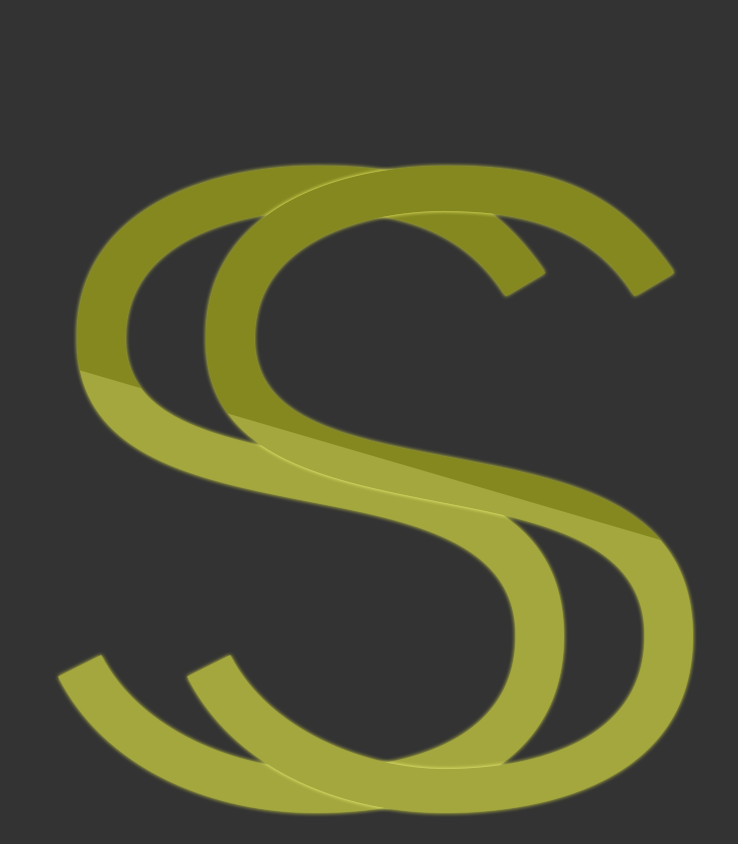
<style>
.page{position:relative;width:738px;height:844px;background:#333333}
.page>*{position:absolute;margin:0}
.t1{font:897.6px "NexaLight"}
</style>
<div class="page">
<p class="t1" style="left:58px;top:165px;width:506px;height:648px">S</p>
<p class="t1" style="left:187px;top:165px;width:506px;height:648px">S</p>
</div>
